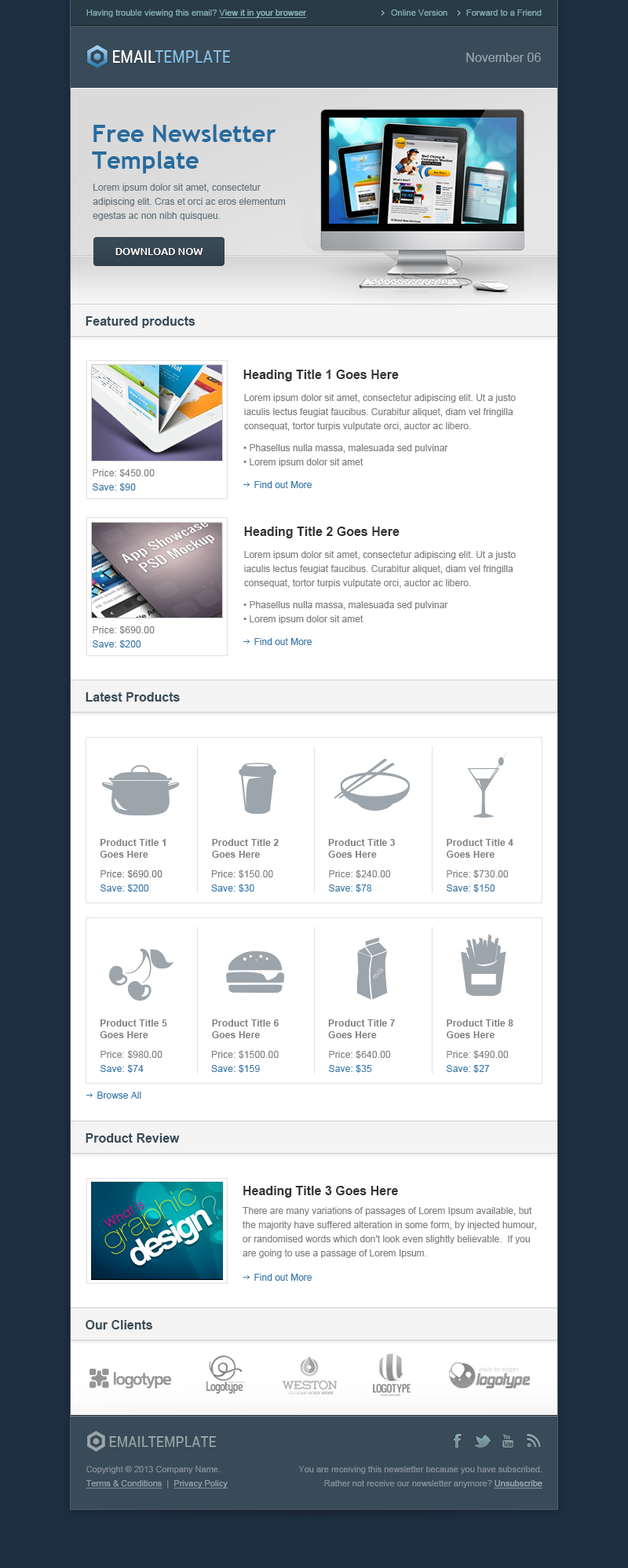
<style>
.page{position:relative;width:628px;height:1568px;background:#ffffff}
.page>*{position:absolute;margin:0}
.t1{font:8.6px "ArialMT";color:#85acb3}
.t2{font:8.6px "ArialMT";color:#8fb9c0;text-decoration:underline}
.t3{font:8.6px "Vani";color:#888888}
.t4{font:17.3px "RobotoCondensed-Regular";color:#ffffff;text-transform:uppercase}
.t5{font:17.3px "RobotoCondensed-Regular";color:#84bbe1;text-transform:uppercase}
.t6{font:12.6px "ArialMT";color:#9ca5ac}
.t7{font:24.3px/26.7px "TrebuchetMS-Bold";color:#286c9e}
.t8{font:9.4px/14.1px "ArialMT";color:#66747d}
.t9{font:10.2px "Ubuntu-Medium";color:#ffffff;text-transform:uppercase}
.t10{font:12.6px "Arial-BoldMT";color:#394b58}
.t11{font:12.6px "Arial-BoldMT";color:#333333}
.t12{font:9.4px/14.1px "ArialMT";color:#808080}
.t13{font:9.4px/14.1px "ArialMT";color:#3479ab}
.t14{font:9.4px "ArialMT";color:#3479ab}
.t15{font:9.4px "Arial-BoldMT";color:#808080}
.t16{font:9.4px/14.1px "ArialMT";color:#777777}
.t17{font:8.6px/14.1px "ArialMT";color:#828d96}
.t18{font:8.6px/14.1px "ArialMT";color:#919faa;text-decoration:underline}
.t19{font:8.6px/14.1px "ArialMT";color:#9facb7;text-decoration:underline}
</style>
<div class="page">
<p class="t1" style="left:86px;top:9px;width:221px;height:9px">Having trouble viewing this email? <span class="t2">View it in your browser</span></p>
<p class="t1" style="left:391px;top:9px;width:56px;height:7px">Online Version</p>
<p class="t1" style="left:466px;top:9px;width:76px;height:7px"><span class="t3"> </span>Forward to a Friend</p>
<p class="t4" style="left:113px;top:50px;width:42px;height:13px">Email</p>
<p class="t5" style="left:155px;top:50px;width:75px;height:13px">Template</p>
<p class="t6" style="left:466px;top:53px;width:75px;height:9px">November 06</p>
<p class="t7" style="left:92px;top:124px;width:184px;height:49px">Free Newsletter<br>Template</p>
<p class="t8" style="left:93px;top:184px;width:193px;height:37px">Lorem ipsum dolor sit amet, consectetur adipiscing elit. Cras et orci ac eros elementum egestas ac non nibh quisqueu.</p>
<p class="t9" style="left:115px;top:248px;width:88px;height:7px">download now</p>
<p class="t10" style="left:86px;top:316px;width:109px;height:12px">Featured products</p>
<p class="t11" style="left:243px;top:370px;width:156px;height:11px">Heading Title 1 Goes Here</p>
<p class="t12" style="left:244px;top:394px;width:272px;height:37px">Lorem ipsum dolor sit amet, consectetur adipiscing elit. Ut a justo iaculis lectus feugiat faucibus. Curabitur aliquet, diam vel fringilla consequat, tortor turpis vulputate orci, auctor ac libero.</p>
<p class="t12" style="left:243px;top:444px;width:205px;height:23px">• Phasellus nulla massa, malesuada sed pulvinar<br>• Lorem ipsum dolor sit amet</p>
<p class="t12" style="left:93px;top:469px;width:62px;height:22px">Price: $450.00<br><span class="t13">Save: $90</span></p>
<p class="t14" style="left:254px;top:481px;width:58px;height:7px">Find out More</p>
<p class="t11" style="left:244px;top:527px;width:155px;height:11px">Heading Title 2 Goes Here</p>
<p class="t12" style="left:244px;top:551px;width:272px;height:37px">Lorem ipsum dolor sit amet, consectetur adipiscing elit. Ut a justo iaculis lectus feugiat faucibus. Curabitur aliquet, diam vel fringilla consequat, tortor turpis vulputate orci, auctor ac libero.</p>
<p class="t12" style="left:243px;top:601px;width:205px;height:23px">• Phasellus nulla massa, malesuada sed pulvinar<br>• Lorem ipsum dolor sit amet</p>
<p class="t12" style="left:93px;top:626px;width:62px;height:22px">Price: $690.00<br><span class="t13">Save: $200</span></p>
<p class="t14" style="left:254px;top:638px;width:58px;height:7px">Find out More</p>
<p class="t10" style="left:86px;top:692px;width:94px;height:10px">Latest Products</p>
<p class="t15" style="left:100px;top:839px;width:66px;height:19px">Product Title 1<br>Goes Here</p>
<p class="t15" style="left:212px;top:839px;width:67px;height:19px">Product Title 2<br>Goes Here</p>
<p class="t15" style="left:328px;top:839px;width:67px;height:19px">Product Title 3<br>Goes Here</p>
<p class="t15" style="left:447px;top:839px;width:66px;height:19px">Product Title 4<br>Goes Here</p>
<p class="t16" style="left:100px;top:870px;width:62px;height:22px">Price: $690.00<br><span class="t13">Save: $200</span></p>
<p class="t12" style="left:211px;top:870px;width:62px;height:22px">Price: $150.00<br><span class="t13">Save: $30</span></p>
<p class="t12" style="left:329px;top:870px;width:62px;height:22px">Price: $240.00<br><span class="t13">Save: $78</span></p>
<p class="t12" style="left:447px;top:870px;width:62px;height:22px">Price: $730.00<br><span class="t13">Save: $150</span></p>
<p class="t15" style="left:100px;top:1019px;width:67px;height:19px">Product Title 5<br>Goes Here</p>
<p class="t15" style="left:212px;top:1019px;width:67px;height:19px">Product Title 6<br>Goes Here</p>
<p class="t15" style="left:328px;top:1019px;width:67px;height:19px">Product Title 7<br>Goes Here</p>
<p class="t15" style="left:447px;top:1019px;width:66px;height:19px">Product Title 8<br>Goes Here</p>
<p class="t12" style="left:100px;top:1051px;width:62px;height:22px">Price: $980.00<br><span class="t13">Save: $74</span></p>
<p class="t12" style="left:211px;top:1051px;width:68px;height:22px">Price: $1500.00<br><span class="t13">Save: $159</span></p>
<p class="t12" style="left:329px;top:1051px;width:62px;height:22px">Price: $640.00<br><span class="t13">Save: $35</span></p>
<p class="t12" style="left:447px;top:1051px;width:62px;height:22px">Price: $490.00<br><span class="t13">Save: $27</span></p>
<p class="t14" style="left:97px;top:1092px;width:44px;height:7px">Browse All</p>
<p class="t10" style="left:86px;top:1133px;width:94px;height:10px">Product Review</p>
<p class="t11" style="left:243px;top:1186px;width:155px;height:12px">Heading Title 3 Goes Here</p>
<p class="t12" style="left:242px;top:1207px;width:295px;height:51px">There are many variations of passages of Lorem Ipsum available, but the majority have suffered alteration in some form, by injected humour, or randomised words which don't look even slightly believable.  If you are going to use a passage of Lorem Ipsum.</p>
<p class="t14" style="left:254px;top:1274px;width:58px;height:7px">Find out More</p>
<p class="t10" style="left:86px;top:1320px;width:66px;height:9px">Our Clients</p>
<p class="t17" style="left:86px;top:1466px;width:142px;height:23px">Copyright © 2013 Company Name.<br><span class="t18">Terms &amp; Conditions  </span>|  <span class="t18">Privacy Policy</span></p>
<p class="t17" style="left:298px;top:1466px;width:244px;height:23px;text-align:right">You are receiving this newsletter because you have subscribed.<br>Rather not receive our newsletter anymore? <span class="t19">Unsubscribe</span></p>
</div>
